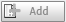
<style>
.page{position:relative;width:66px;height:22px}
.page>*{position:absolute;margin:0}
.t1{font:11.2px "Tahoma";letter-spacing:0.1em;color:#8d8d8d;scale:0.86 1}
</style>
<div class="page">
<p class="t1" style="left:29px;top:6px;width:19px;height:9px">Add</p>
</div>
